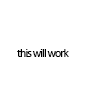
<style>
.page{position:relative;width:100px;height:100px;background:#ffffff}
.page>*{position:absolute;margin:0}
.t1{font:12px "Calibri";letter-spacing:-0.08em;color:#000000}
</style>
<div class="page">
<p class="t1" style="left:17px;top:49px;width:52px;height:8px">this will work</p>
</div>
